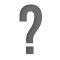
<style>
.page{position:relative;width:60px;height:60px;background:#ffffff}
.page>*{position:absolute;margin:0}
.t1{font:70px "BebasNeue";letter-spacing:0.01em;color:#676767}
</style>
<div class="page">
<p class="t1" style="left:19px;top:4px;width:23px;height:50px">?</p>
</div>
